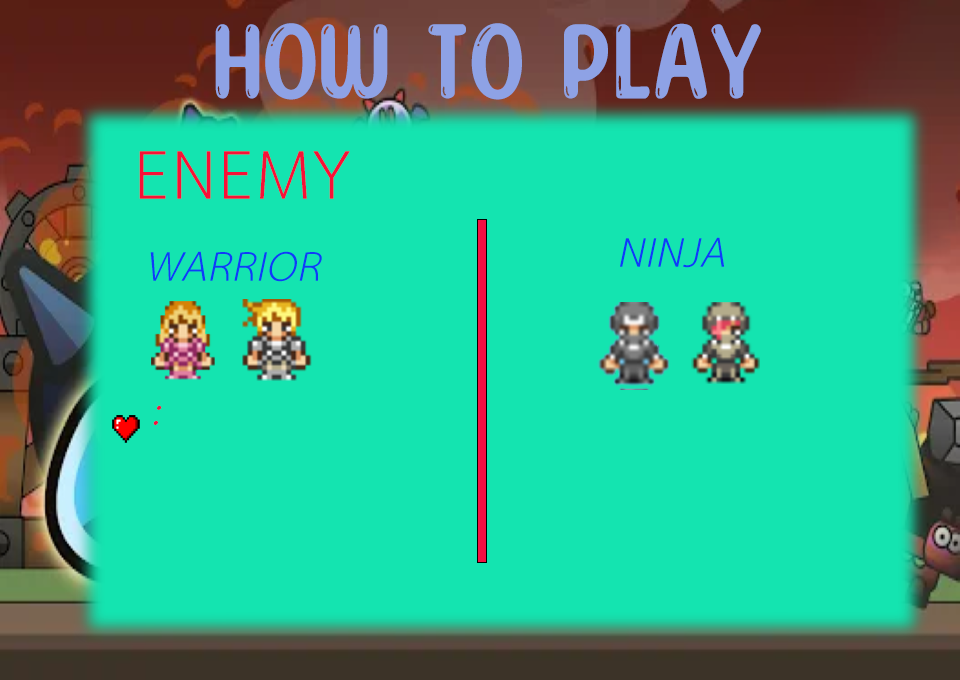
<style>
.page{position:relative;width:960px;height:680px;background:#14e4b0}
.page>*{position:absolute;margin:0}
.t1{font:120px "SunnySpells-Regular";letter-spacing:0.025em;color:#8ea2e5;text-transform:uppercase}
.t2{font:100px "THSarabunITù";letter-spacing:0.025em;color:#f81037;text-transform:uppercase}
.t3{font:60px "THSarabunITù-Italic";letter-spacing:0.025em;color:#103bf8;text-transform:uppercase}
.t4{font:60px "THSarabunITù-Italic";letter-spacing:0.025em;color:#f41142;text-transform:uppercase}
</style>
<div class="page">
<p class="t1" style="left:215px;top:23px;width:546px;height:77px">how to play</p>
<p class="t2" style="left:139px;top:151px;width:211px;height:48px">ENeMy</p>
<p class="t3" style="left:620px;top:237px;width:105px;height:31px">ninja</p>
<p class="t3" style="left:150px;top:251px;width:172px;height:31px">warrior</p>
<p class="t4" style="left:153px;top:405px;width:9px;height:20px">:</p>
</div>
